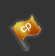
<style>
.page{position:relative;width:55px;height:56px;background:#333333}
.page>*{position:absolute;margin:0}
.t1{font:10.8px "MicrosoftSansSerif";color:#f8f8f8}
</style>
<div class="page">
<p class="t1" style="left:20px;top:22px;width:12px;height:11px;rotate:-33deg">cp</p>
</div>
